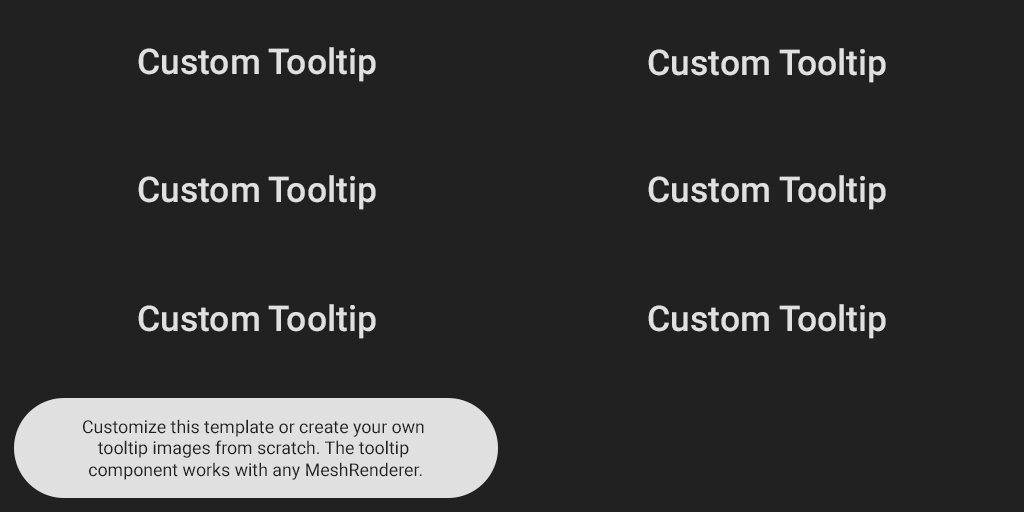
<style>
.page{position:relative;width:1024px;height:512px;background:#212121}
.page>*{position:absolute;margin:0}
.t1{font:35.6px "Roboto-Medium";color:#e0e0e0}
.t2{font:17.8px "Roboto-Regular";color:#212121}
</style>
<div class="page">
<p class="t1" style="left:138px;top:47px;width:238px;height:35px">Custom Tooltip</p>
<p class="t1" style="left:648px;top:48px;width:238px;height:35px">Custom Tooltip</p>
<p class="t1" style="left:138px;top:175px;width:238px;height:35px">Custom Tooltip</p>
<p class="t1" style="left:648px;top:175px;width:238px;height:35px">Custom Tooltip</p>
<p class="t1" style="left:138px;top:304px;width:238px;height:35px">Custom Tooltip</p>
<p class="t1" style="left:648px;top:304px;width:238px;height:35px">Custom Tooltip</p>
<p class="t2" style="left:83px;top:419px;width:341px;height:61px;text-align:center">Customize this template or create your own <br>tooltip images from scratch. The tooltip <br>component works with any MeshRenderer.</p>
</div>
